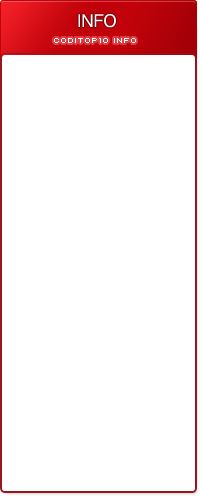
<style>
.page{position:relative;width:200px;height:500px;background:#ffffff}
.page>*{position:absolute;margin:0}
.t1{font:18px "YDIYGO330";color:#ffffff}
.t2{font:8px "Kroeger0554";color:#ffffff;text-transform:uppercase}
</style>
<div class="page">
<p class="t1" style="left:78px;top:14px;width:38px;height:14px">INFO</p>
<p class="t2" style="left:54px;top:38px;width:82px;height:5px">CODITOP10 INFO</p>
</div>
